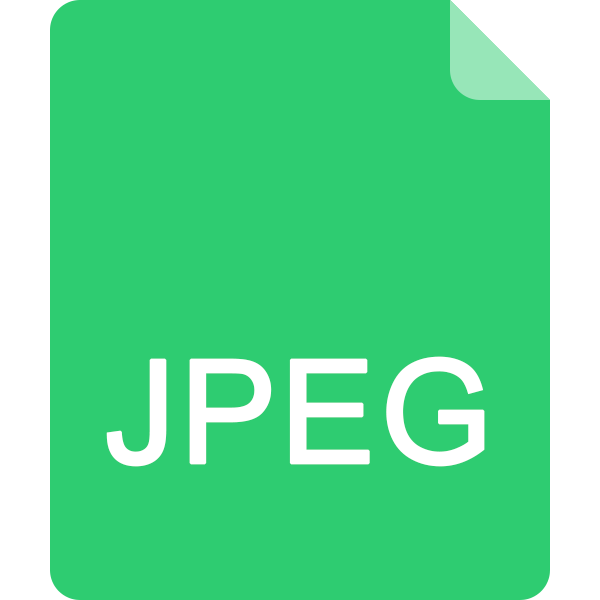
<style>
.page{position:relative;width:600px;height:600px;background:#2ecc71}
.page>*{position:absolute;margin:0}
.t1{font:144px "ArialMT";color:#ffffff;text-transform:uppercase;font-weight:bold}
</style>
<div class="page">
<p class="t1" style="left:106px;top:356px;width:379px;height:111px">jpeg</p>
</div>
